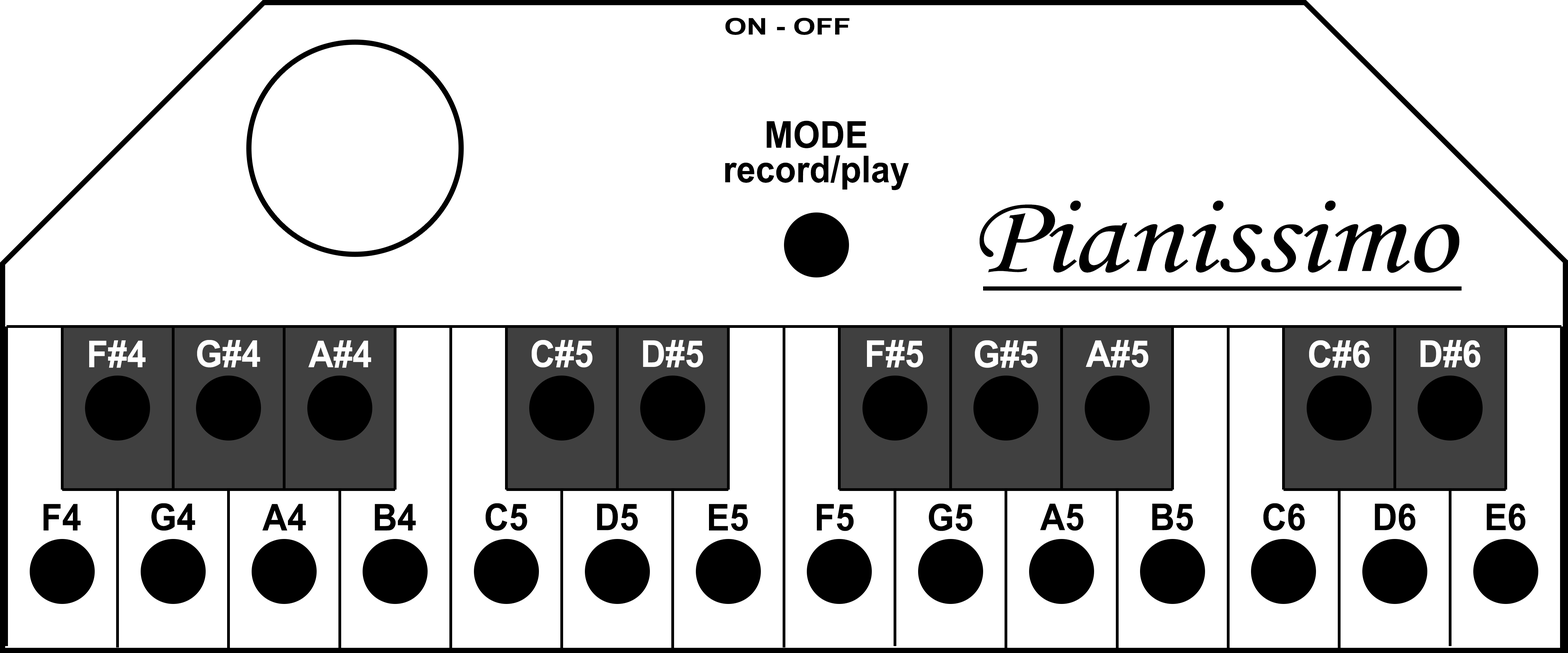
<style>
.page{position:relative;width:1568px;height:653px;background:#ffffff}
.page>*{position:absolute;margin:0}
.t1{font:23px "Arial-BoldMT";color:#000000;scale:1.26 1}
.t2{font:37px/34.6px "Arial-BoldMT";color:#000000;scale:0.93 1}
.t3{font:113.5px "MonotypeCorsiva";color:#000000;scale:1.12 1}
.t4{font:37px "Arial-BoldMT";color:#ffffff;scale:0.93 1}
.t5{font:37px "Arial-BoldMT";color:#000000;scale:0.93 1}
</style>
<div class="page">
<p class="t1" style="left:725px;top:18px;width:125px;height:17px">ON - OFF</p>
<p class="t2" style="left:725px;top:121px;width:184px;height:69px;text-align:center">MODE<br>record/play</p>
<p class="t3" style="left:979px;top:200px;width:480px;height:73px">Pianissimo</p>
<p class="t4" style="left:89px;top:340px;width:57px;height:28px">F#4</p>
<p class="t4" style="left:197px;top:340px;width:63px;height:28px">G#4</p>
<p class="t4" style="left:308px;top:340px;width:63px;height:28px">A#4</p>
<p class="t4" style="left:532px;top:340px;width:60px;height:28px">C#5</p>
<p class="t4" style="left:643px;top:340px;width:60px;height:28px">D#5</p>
<p class="t4" style="left:867px;top:340px;width:56px;height:28px">F#5</p>
<p class="t4" style="left:975px;top:340px;width:63px;height:28px">G#5</p>
<p class="t4" style="left:1086px;top:340px;width:62px;height:28px">A#5</p>
<p class="t4" style="left:1309px;top:340px;width:61px;height:28px">C#6</p>
<p class="t4" style="left:1420px;top:340px;width:61px;height:28px">D#6</p>
<p class="t5" style="left:44px;top:504px;width:37px;height:27px">F4</p>
<p class="t5" style="left:151px;top:503px;width:44px;height:28px">G4</p>
<p class="t5" style="left:262px;top:504px;width:44px;height:27px">A4</p>
<p class="t5" style="left:375px;top:504px;width:41px;height:27px">B4</p>
<p class="t5" style="left:485px;top:503px;width:42px;height:28px">C5</p>
<p class="t5" style="left:597px;top:504px;width:41px;height:27px">D5</p>
<p class="t5" style="left:709px;top:504px;width:39px;height:27px">E5</p>
<p class="t5" style="left:817px;top:504px;width:37px;height:27px">F5</p>
<p class="t5" style="left:929px;top:504px;width:43px;height:27px">G5</p>
<p class="t5" style="left:1040px;top:504px;width:43px;height:27px">A5</p>
<p class="t5" style="left:1152px;top:504px;width:41px;height:27px">B5</p>
<p class="t5" style="left:1263px;top:503px;width:42px;height:28px">C6</p>
<p class="t5" style="left:1375px;top:504px;width:41px;height:27px">D6</p>
<p class="t5" style="left:1487px;top:504px;width:38px;height:27px">E6</p>
</div>
